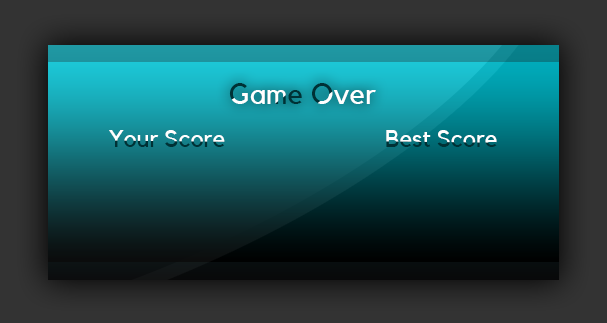
<style>
.page{position:relative;width:607px;height:323px}
.page>*{position:absolute;margin:0}
.t1{font:29.3px "Kollektif";color:#ffffff}
.t2{font:24px "Kollektif"}
.t3{font:24px "Kollektif";color:#ffffff}
</style>
<div class="page">
<p class="t1" style="left:229px;top:83px;width:147px;height:21px">Game Over</p>
<p class="t2" style="left:109px;top:130px;width:116px;height:17px">Your Score</p>
<p class="t3" style="left:386px;top:130px;width:111px;height:17px">Best Score</p>
</div>
